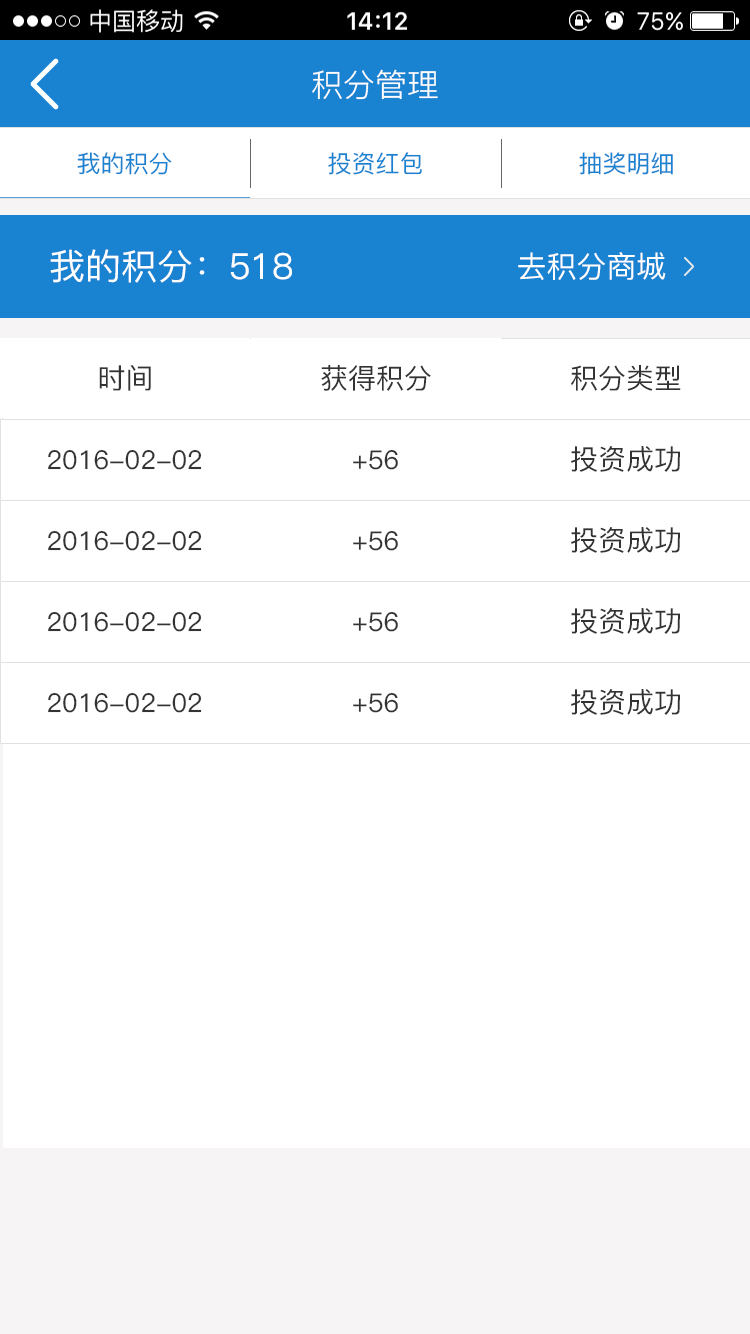
<style>
.page{position:relative;width:750px;height:1334px;background:#ffffff}
.page>*{position:absolute;margin:0}
.t1{font:32px "PingFang-SC-Regular";color:#ffffff}
.t2{font:24px "PingFang-SC-Medium";color:#1a83d1}
.t3{font:36px "PingFang-SC-Medium";color:#ffffff}
.t4{font:30px "PingFang-SC-Medium";color:#ffffff}
.t5{font:28px "PingFang-SC-Medium";color:#333333}
.t6{font:26px "PingFang-SC-Medium";color:#333333}
</style>
<div class="page">
<p class="t1" style="left:312px;top:69px;width:126px;height:31px">积分管理</p>
<p class="t2" style="left:77px;top:152px;width:95px;height:23px">我的积分</p>
<p class="t2" style="left:328px;top:152px;width:94px;height:23px">投资红包</p>
<p class="t2" style="left:579px;top:152px;width:94px;height:23px">抽奖明细</p>
<p class="t3" style="left:50px;top:249px;width:242px;height:34px">我的积分：518</p>
<p class="t4" style="left:518px;top:252px;width:148px;height:29px">去积分商城</p>
<p class="t5" style="left:99px;top:365px;width:52px;height:26px">时间</p>
<p class="t5" style="left:321px;top:365px;width:110px;height:26px">获得积分</p>
<p class="t5" style="left:571px;top:365px;width:110px;height:26px">积分类型</p>
<p class="t6" style="left:48px;top:449px;width:154px;height:21px">2016-02-02</p>
<p class="t6" style="left:353px;top:449px;width:45px;height:21px">+56</p>
<p class="t5" style="left:571px;top:446px;width:109px;height:26px">投资成功</p>
<p class="t6" style="left:48px;top:530px;width:154px;height:21px">2016-02-02</p>
<p class="t6" style="left:353px;top:530px;width:45px;height:21px">+56</p>
<p class="t5" style="left:571px;top:527px;width:109px;height:26px">投资成功</p>
<p class="t6" style="left:48px;top:611px;width:154px;height:21px">2016-02-02</p>
<p class="t6" style="left:353px;top:611px;width:45px;height:21px">+56</p>
<p class="t5" style="left:571px;top:608px;width:109px;height:26px">投资成功</p>
<p class="t5" style="left:571px;top:689px;width:109px;height:26px">投资成功</p>
<p class="t6" style="left:48px;top:692px;width:154px;height:21px">2016-02-02</p>
<p class="t6" style="left:353px;top:692px;width:45px;height:21px">+56</p>
</div>
